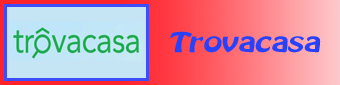
<style>
.page{position:relative;width:340px;height:85px}
.page>*{position:absolute;margin:0}
.t1{font:24px "BATAVIA";letter-spacing:0.05em;color:#2841fc}
</style>
<div class="page">
<p class="t1" style="left:170px;top:31px;width:151px;height:22px">Trovacasa</p>
</div>
